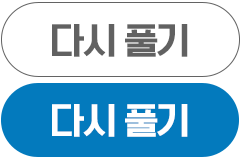
<style>
.page{position:relative;width:240px;height:160px;background:#ffffff}
.page>*{position:absolute;margin:0}
.t1{font:35px "TTOmniGothicH";letter-spacing:-0.05em;color:#616161;text-transform:uppercase}
.t2{font:35px "TTOmniGothicH";letter-spacing:-0.05em;color:#ffffff;text-transform:uppercase}
</style>
<div class="page">
<p class="t1" style="left:52px;top:24px;width:136px;height:33px">다시 풀기</p>
<p class="t2" style="left:52px;top:104px;width:136px;height:33px">다시 풀기</p>
</div>
